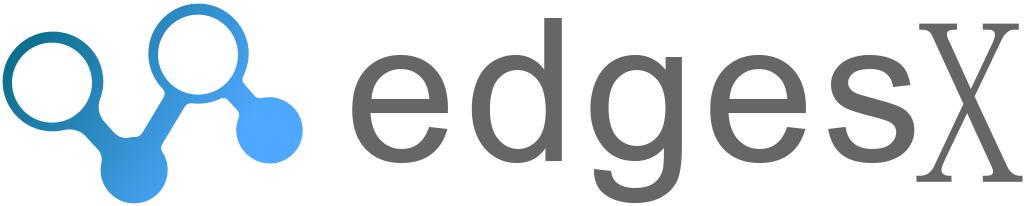
<style>
.page{position:relative;width:1030px;height:206px;background:#ffffff}
.page>*{position:absolute;margin:0}
.t1{font:200px "ArialMT";letter-spacing:0.04em;color:#666666}
.t2{font:236px "MS-Mincho";letter-spacing:0.04em;color:#666666}
.t3{font:290px "HGGyoshotai";letter-spacing:0.04em;color:#666666}
</style>
<div class="page">
<p class="t1" style="left:352px;top:18px;width:563px;height:185px">edges</p>
<p class="t2" style="left:916px;top:23px;width:107px;height:159px"><span class="t3"> </span>X</p>
</div>
